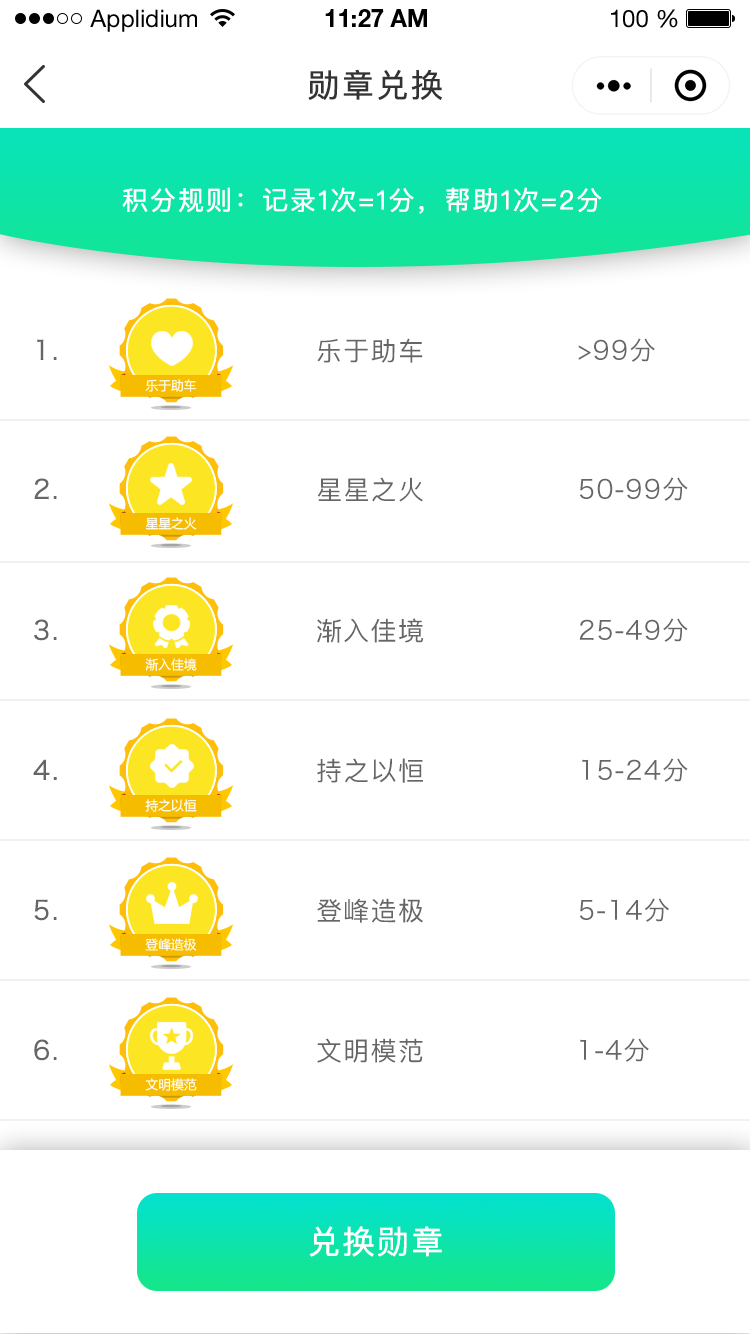
<style>
.page{position:relative;width:750px;height:1334px;background:#ffffff}
.page>*{position:absolute;margin:0}
.t1{font:24px "HelveticaNeueLTStd-Roman";color:#000000}
.t2{font:24px "HelveticaNeueLTStd-Bd";color:#000000}
.t3{font:32px "PingFangSC-Regular";letter-spacing:0.05em;color:#333333;font-weight:bold}
.t4{font:26px "PingFangSC-Regular";letter-spacing:0.05em;color:#ffffff;font-weight:bold}
.t5{font:26px "HiraginoSansGB-W3";letter-spacing:0.05em;color:#666666;font-weight:bold}
.t6{font:26px "PingFangSC-Regular";letter-spacing:0.05em;color:#666666}
.t7{font:26px "HiraginoSansGB-W3";letter-spacing:0.05em;color:#666666}
.t8{font:12.7px "MicrosoftYaHei";color:#ffffff}
.t9{font:32px "PingFangSC-Regular";letter-spacing:0.05em;color:#ffffff;font-weight:bold}
</style>
<div class="page">
<p class="t1" style="left:90px;top:9px;width:107px;height:23px">Applidium</p>
<p class="t2" style="left:325px;top:9px;width:102px;height:18px">11:27 AM</p>
<p class="t1" style="left:611px;top:9px;width:67px;height:19px">100 %</p>
<p class="t3" style="left:308px;top:69px;width:134px;height:31px">勋章兑换</p>
<p class="t4" style="left:122px;top:187px;width:480px;height:27px">积分规则：记录1次=1分，帮助1次=2分</p>
<p class="t5" style="left:37px;top:339px;width:20px;height:21px">1.</p>
<p class="t6" style="left:317px;top:338px;width:106px;height:25px">乐于助车</p>
<p class="t7" style="left:578px;top:338px;width:77px;height:24px">&gt;99分</p>
<p class="t8" style="left:145px;top:379px;width:52px;height:13px">乐于助车</p>
<p class="t5" style="left:34px;top:478px;width:23px;height:22px">2.</p>
<p class="t6" style="left:317px;top:477px;width:106px;height:25px">星星之火</p>
<p class="t7" style="left:579px;top:477px;width:109px;height:24px">50-99分</p>
<p class="t8" style="left:145px;top:517px;width:52px;height:13px">星星之火</p>
<p class="t5" style="left:34px;top:619px;width:23px;height:22px">3.</p>
<p class="t6" style="left:317px;top:618px;width:106px;height:25px">渐入佳境</p>
<p class="t7" style="left:579px;top:618px;width:109px;height:24px">25-49分</p>
<p class="t8" style="left:145px;top:658px;width:52px;height:13px">渐入佳境</p>
<p class="t5" style="left:33px;top:759px;width:24px;height:21px">4.</p>
<p class="t6" style="left:317px;top:758px;width:106px;height:25px">持之以恒</p>
<p class="t7" style="left:582px;top:758px;width:106px;height:24px">15-24分</p>
<p class="t8" style="left:145px;top:799px;width:52px;height:13px">持之以恒</p>
<p class="t5" style="left:34px;top:899px;width:23px;height:22px">5.</p>
<p class="t6" style="left:317px;top:898px;width:106px;height:25px">登峰造极</p>
<p class="t7" style="left:579px;top:898px;width:90px;height:24px">5-14分</p>
<p class="t8" style="left:145px;top:938px;width:52px;height:13px">登峰造极</p>
<p class="t6" style="left:317px;top:1038px;width:106px;height:25px">文明模范</p>
<p class="t7" style="left:580px;top:1038px;width:69px;height:24px">1-4分</p>
<p class="t5" style="left:34px;top:1039px;width:23px;height:22px">6.</p>
<p class="t8" style="left:145px;top:1078px;width:52px;height:13px">文明模范</p>
<p class="t9" style="left:309px;top:1226px;width:133px;height:31px">兑换勋章</p>
</div>
